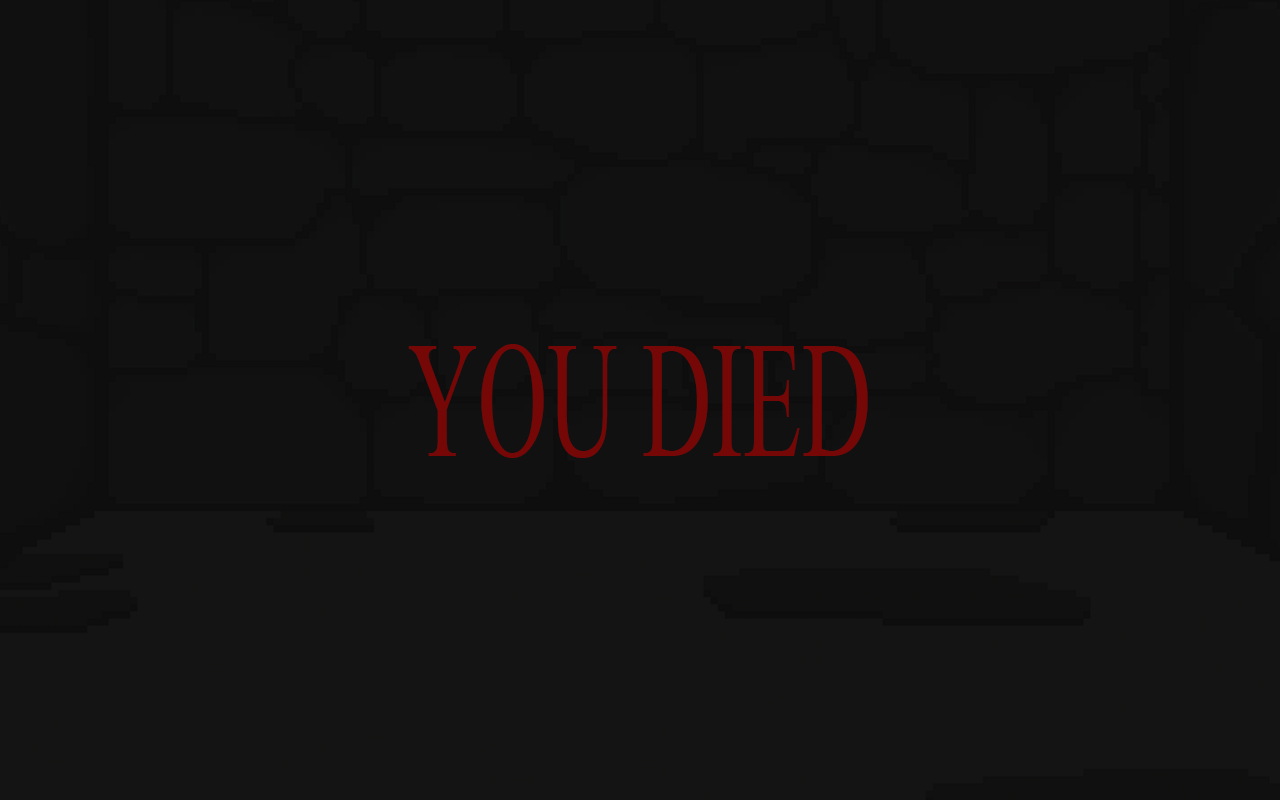
<style>
.page{position:relative;width:1280px;height:800px;background:#111111}
.page>*{position:absolute;margin:0}
.t1{font:165.1px "TimesNewRomanPSMT";color:#750707;scale:0.58 1}
</style>
<div class="page">
<p class="t1" style="left:408px;top:344px;width:460px;height:114px">YOU DIED</p>
</div>
